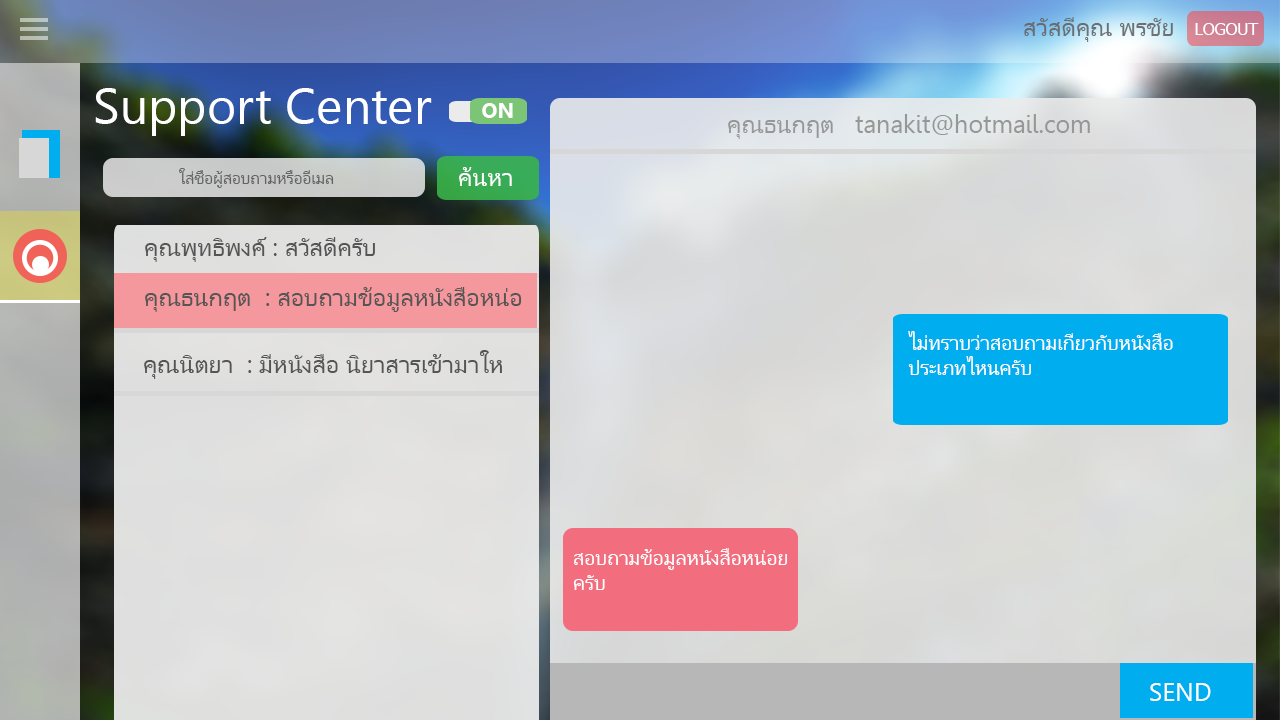
<style>
.page{position:relative;width:1280px;height:720px}
.page>*{position:absolute;margin:0}
.t1{font:25px "Leelawadee";color:#646464}
.t2{font:16.7px "Tahoma";color:#ffffff}
.t3{font:50px "Leelawadee";color:#ffffff}
.t4{font:20.8px "Leelawadee-Bold";color:#ffffff}
.t5{font:25px "Leelawadee";color:#979797}
.t6{font:16.7px "Leelawadee";color:#646464}
.t7{font:25px "Leelawadee";color:#ffffff}
.t8{font:25px "Leelawadee";color:#565555}
.t9{font:20.8px "Leelawadee";color:#ffffff}
</style>
<div class="page">
<p class="t1" style="left:1024px;top:17px;width:149px;height:25px;opacity:0.93">สวัสดีคุณ พรชัย</p>
<p class="t2" style="left:1195px;top:23px;width:64px;height:12px">LOGOUT</p>
<p class="t3" style="left:95px;top:88px;width:337px;height:48px">Support Center</p>
<p class="t4" style="left:482px;top:103px;width:31px;height:15px">ON</p>
<p class="t5" style="left:728px;top:114px;width:362px;height:25px">คุณธนกฤต   tanakit@hotmail.com</p>
<p class="t6" style="left:179px;top:168px;width:155px;height:20px">ใส่ชื่อผู้สอบถามหรืออีเมล</p>
<p class="t7" style="left:459px;top:167px;width:53px;height:19px">ค้นหา</p>
<p class="t8" style="left:145px;top:237px;width:230px;height:25px">คุณพุทธิพงค์ : สวัสดีครับ</p>
<p class="t8" style="left:145px;top:287px;width:377px;height:25px">คุณธนกฤต  : สอบถามข้อมูลหนังสือหน่อ</p>
<p class="t9" style="left:908px;top:331px;width:265px;height:44px">ไม่ทราบว่าสอบถามเกี่ยวกับหนังสือ<br>ประเภทไหนครับ</p>
<p class="t8" style="left:144px;top:350px;width:358px;height:29px">คุณนิตยา  : มีหนังสือ นิยาสารเข้ามาให</p>
<p class="t9" style="left:573px;top:548px;width:214px;height:42px">สอบถามข้อมูลหนังสือหน่อยครับ</p>
<p class="t7" style="left:1150px;top:683px;width:61px;height:18px">SEND</p>
</div>
